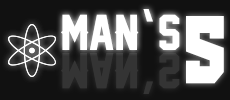
<style>
.page{position:relative;width:230px;height:100px;background:#111111}
.page>*{position:absolute;margin:0}
.t1{font:45.8px "LegendM54";color:#ffffff}
.t2{font:45.8px "Corbel-Bold";color:#ffffff}
.t3{font:111.9px "OldSchoolUnitedRegular";color:#ffffff;scale:0.82 1}
.t4{font:45.8px "LegendM54";color:#343434}
.t5{font:45.8px "Corbel-Bold";color:#343434}
</style>
<div class="page">
<p class="t1" style="left:61px;top:14px;width:78px;height:36px">Man</p>
<p class="t2" style="left:143px;top:9px;width:10px;height:13px">‘</p>
<p class="t1" style="left:159px;top:14px;width:21px;height:36px">S</p>
<p class="t3" style="left:186px;top:16px;width:38px;height:68px">5</p>
<p class="t4" style="left:61px;top:53px;width:78px;height:36px">Man</p>
<p class="t4" style="left:159px;top:53px;width:21px;height:36px">S</p>
<p class="t5" style="left:143px;top:81px;width:10px;height:13px">‘</p>
</div>
